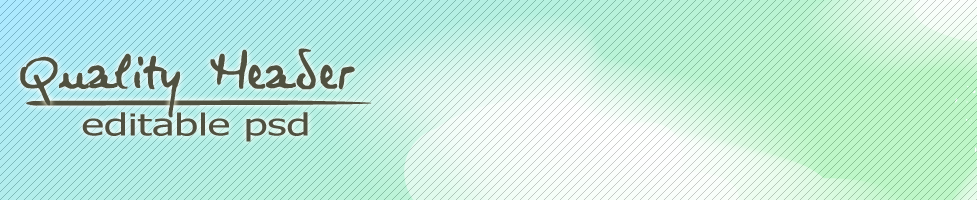
<style>
.page{position:relative;width:977px;height:200px}
.page>*{position:absolute;margin:0}
.t1{font:49.7px "Virginie";color:#505140;font-weight:bold}
.t2{font:30.3px "Tahoma";color:#505140;scale:1.41 1}
</style>
<div class="page">
<p class="t1" style="left:20px;top:48px;width:335px;height:70px">Quality Header</p>
<p class="t2" style="left:82px;top:112px;width:226px;height:30px">editable psd</p>
</div>
